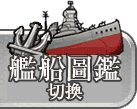
<style>
.page{position:relative;width:137px;height:109px;background:#ffffff}
.page>*{position:absolute;margin:0}
.t1{font:28px/28px "RyuminPr6N-Medium";color:#fff8f3}
.t2{font:18px/28px "RyuminPr6N-Medium";color:#fff8f3}
</style>
<div class="page">
<p class="t1" style="left:9px;top:55px;width:112px;height:45px;text-align:center">艦船圖鑑<br><span class="t2">切換</span></p>
</div>
